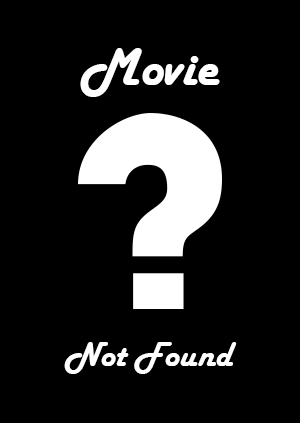
<style>
.page{position:relative;width:300px;height:423px;background:#000000}
.page>*{position:absolute;margin:0}
.t1{font:54.8px "HarlowSolid";color:#ffffff}
.t2{font:36px "HarlowSolid";color:#ffffff}
</style>
<div class="page">
<p class="t1" style="left:80px;top:48px;width:140px;height:49px">Movie</p>
<p class="t2" style="left:64px;top:342px;width:173px;height:32px">Not Found</p>
</div>
